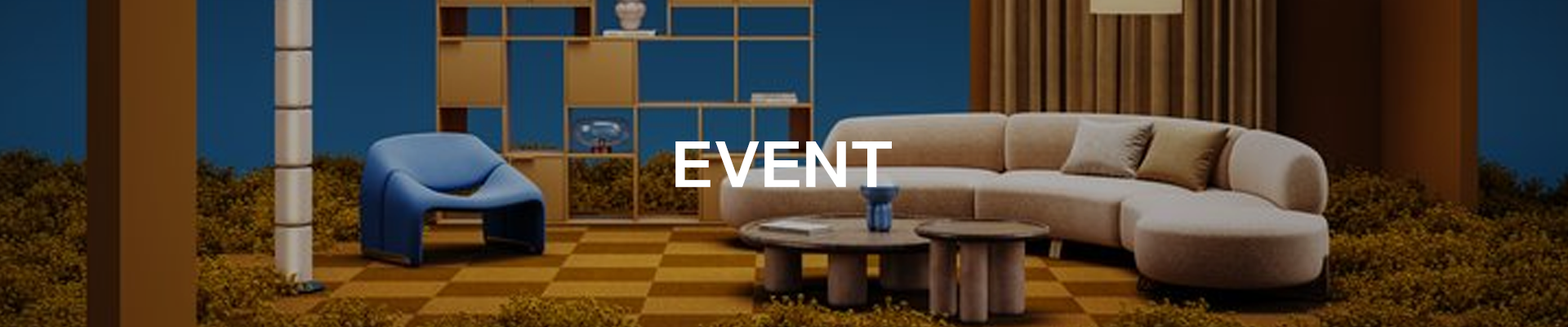
<style>
.page{position:relative;width:1568px;height:327px}
.page>*{position:absolute;margin:0}
.t1{font:57.8px "SBAggroM";color:#ffffff}
</style>
<div class="page">
<p class="t1" style="left:675px;top:141px;width:217px;height:46px">EVENT</p>
</div>
